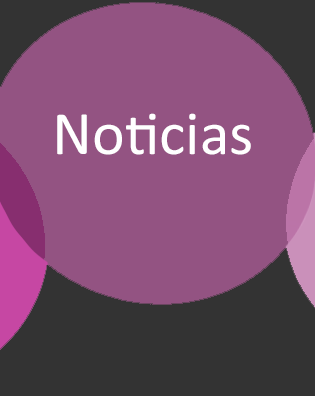
<style>
.page{position:relative;width:315px;height:396px;background:#935382}
.page>*{position:absolute;margin:0}
.t1{font:62px "Calibri";color:#ffffff}
</style>
<div class="page">
<p class="t1" style="left:57px;top:113px;width:194px;height:42px">Noticias</p>
</div>
